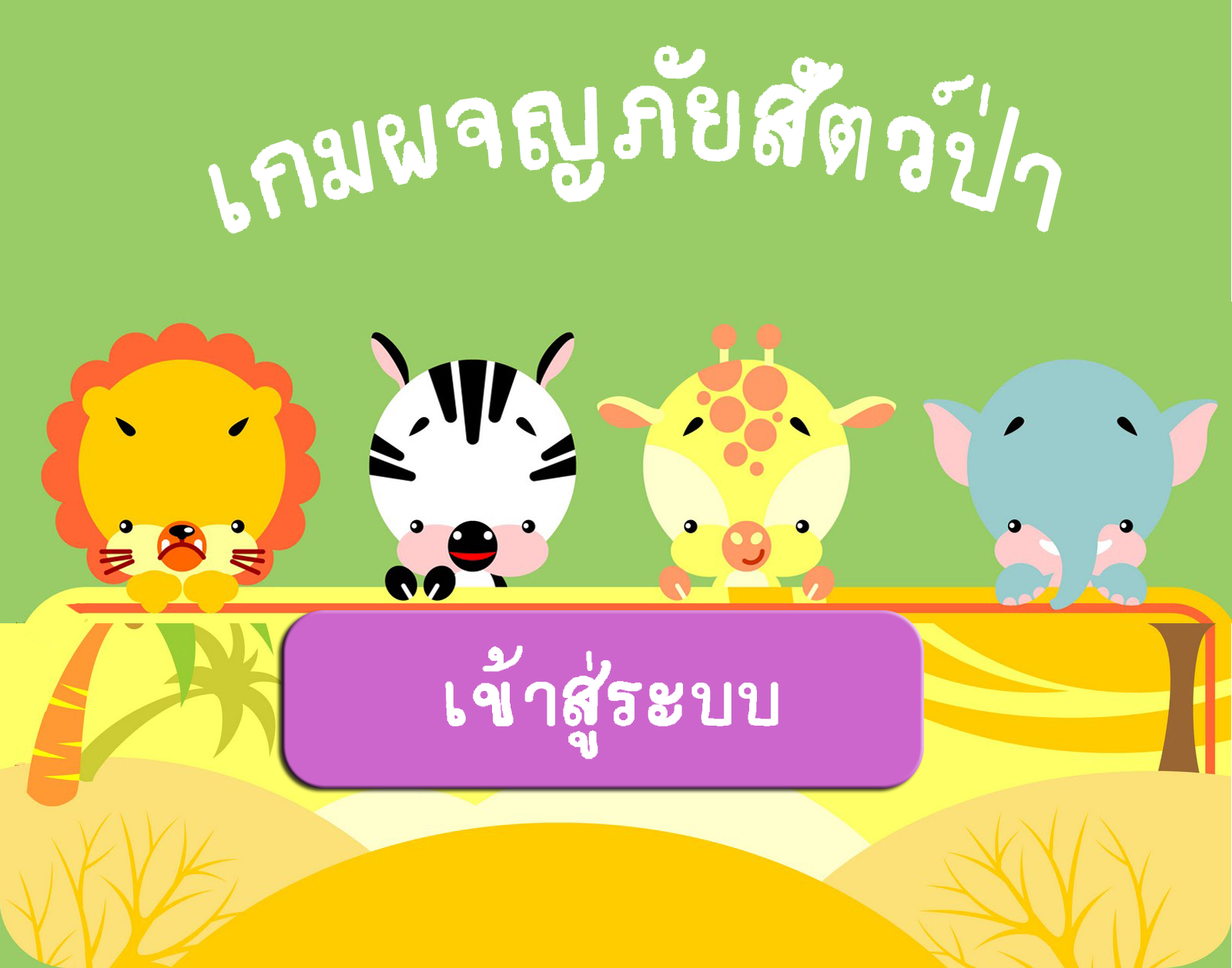
<style>
.page{position:relative;width:1232px;height:968px;background:#99cc67}
.page>*{position:absolute;margin:0}
.t1{font:192.4px "teddy";color:#ffffff;scale:0.8 1}
.t2{font:115.5px "teddy";color:#ffffff}
</style>
<div class="page">
<p class="t1" style="left:208px;top:45px;width:853px;height:189px">เกมผจญภัยสัตว์ป่า</p>
<p class="t2" style="left:445px;top:646px;width:333px;height:114px">เข้าสู่ระบบ</p>
</div>
